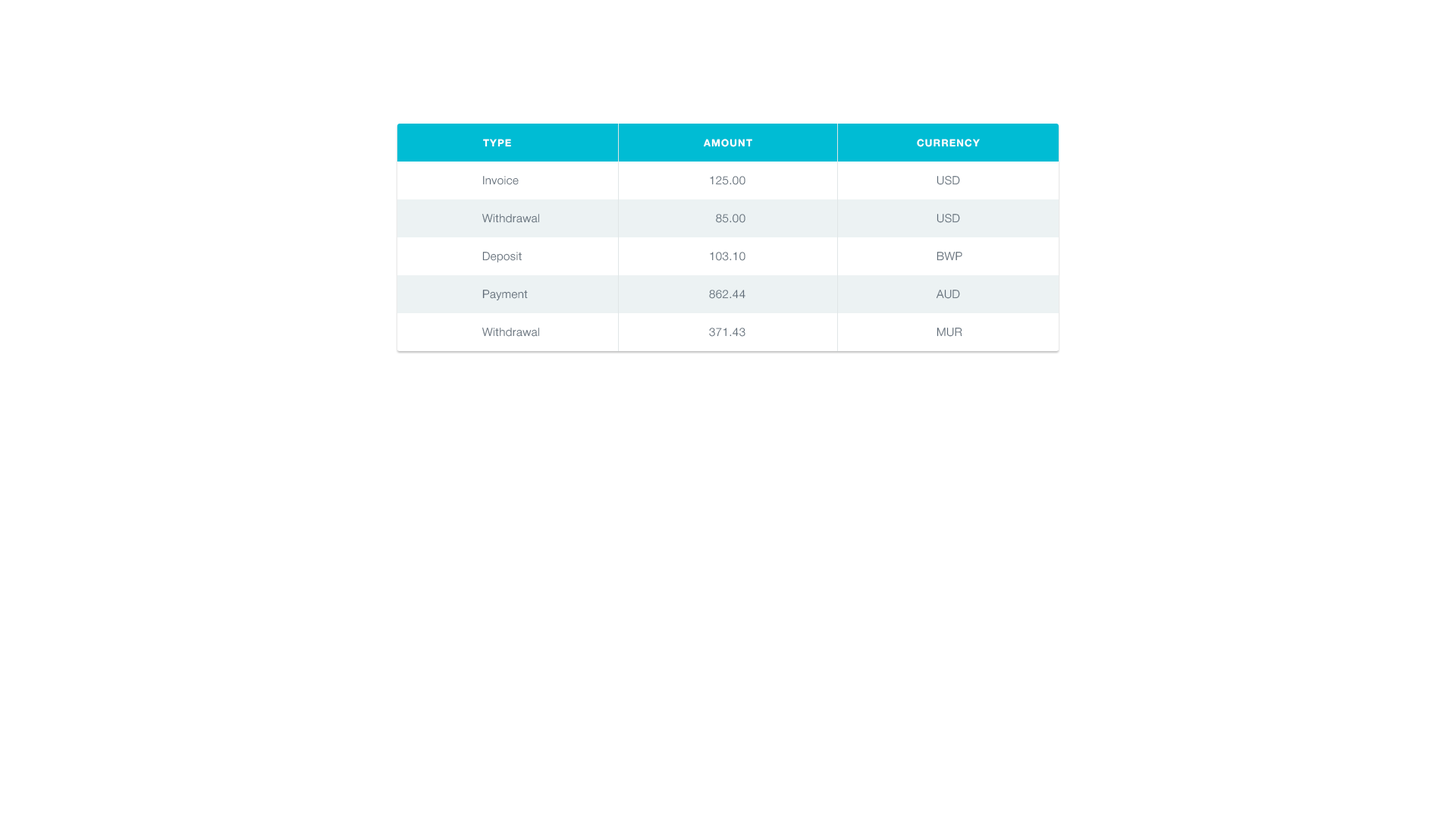
<style>
.page{position:relative;width:1456px;height:819px;background:#ffffff}
.page>*{position:absolute;margin:0}
.t1{font:9.9px "HelveticaNeueCyr-Bold";letter-spacing:0.09em;color:#ffffff;text-transform:uppercase}
.t2{font:11.4px "HelveticaNeueCyr-Light";letter-spacing:0.03em;color:#5c6975}
</style>
<div class="page">
<p class="t1" style="left:483px;top:139px;width:28px;height:8px">Type</p>
<p class="t1" style="left:704px;top:139px;width:48px;height:8px">Amount</p>
<p class="t1" style="left:917px;top:139px;width:63px;height:8px">Currency</p>
<p class="t2" style="left:483px;top:176px;width:36px;height:9px">Invoice</p>
<p class="t2" style="left:710px;top:176px;width:35px;height:9px">125.00</p>
<p class="t2" style="left:937px;top:175px;width:23px;height:10px">USD</p>
<p class="t2" style="left:482px;top:214px;width:57px;height:9px">Withdrawal</p>
<p class="t2" style="left:716px;top:214px;width:29px;height:9px">85.00</p>
<p class="t2" style="left:937px;top:213px;width:23px;height:10px">USD</p>
<p class="t2" style="left:482px;top:252px;width:40px;height:11px">Deposit</p>
<p class="t2" style="left:710px;top:252px;width:35px;height:9px">103.10</p>
<p class="t2" style="left:937px;top:252px;width:25px;height:9px">BWP</p>
<p class="t2" style="left:482px;top:290px;width:46px;height:11px">Payment</p>
<p class="t2" style="left:709px;top:290px;width:36px;height:9px">862.44</p>
<p class="t2" style="left:936px;top:290px;width:24px;height:9px">AUD</p>
<p class="t2" style="left:482px;top:328px;width:57px;height:9px">Withdrawal</p>
<p class="t2" style="left:709px;top:328px;width:36px;height:9px">371.43</p>
<p class="t2" style="left:937px;top:328px;width:25px;height:9px">MUR</p>
</div>
